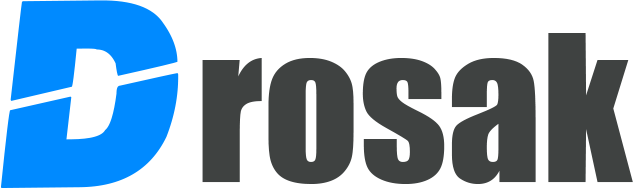
<style>
.page{position:relative;width:633px;height:188px;background:#ffffff}
.page>*{position:absolute;margin:0}
.t1{font:266.7px "PaybAck";color:#008aff;scale:1.13 1}
.t2{font:187.5px "Impact";color:#3f4241}
</style>
<div class="page">
<p class="t1" style="left:0px;top:0px;width:179px;height:188px;rotate:-1deg">d</p>
<p class="t2" style="left:202px;top:33px;width:431px;height:151px">rosak</p>
</div>
